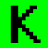
<style>
.page{position:relative;width:48px;height:48px;background:#00ff00}
.page>*{position:absolute;margin:0}
.t1{font:48px "System";color:#000000}
</style>
<div class="page">
<p class="t1" style="left:10px;top:5px;width:31px;height:38px">K</p>
</div>
